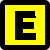
<style>
.page{position:relative;width:50px;height:50px;background:#ffff00}
.page>*{position:absolute;margin:0}
.t1{font:41.7px "Cafe24Decobox";color:#000000}
</style>
<div class="page">
<p class="t1" style="left:15px;top:11px;width:21px;height:29px">E</p>
</div>
